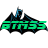
<style>
.page{position:relative;width:48px;height:48px;background:#ffffff}
.page>*{position:absolute;margin:0}
.t1{font:11.3px "BladeRunnerMovieFont";color:#00dc7a}
</style>
<div class="page">
<p class="t1" style="left:1px;top:21px;width:46px;height:8px">BTMSS</p>
</div>
